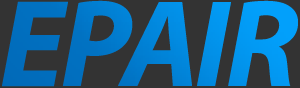
<style>
.page{position:relative;width:300px;height:88px;background:#333333}
.page>*{position:absolute;margin:0}
.t1{font:125.1px "MyriadPro-BoldIt";letter-spacing:-0.025em}
</style>
<div class="page">
<p class="t1" style="left:2px;top:0px;width:296px;height:87px">EPAIR</p>
</div>
